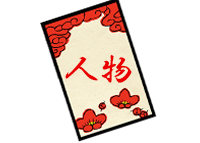
<style>
.page{position:relative;width:200px;height:143px;background:#ffffff}
.page>*{position:absolute;margin:0}
.t1{font:36px "HGSGyoshotai";color:#ea0000}
</style>
<div class="page">
<p class="t1" style="left:65px;top:54px;width:67px;height:29px">人物</p>
</div>
